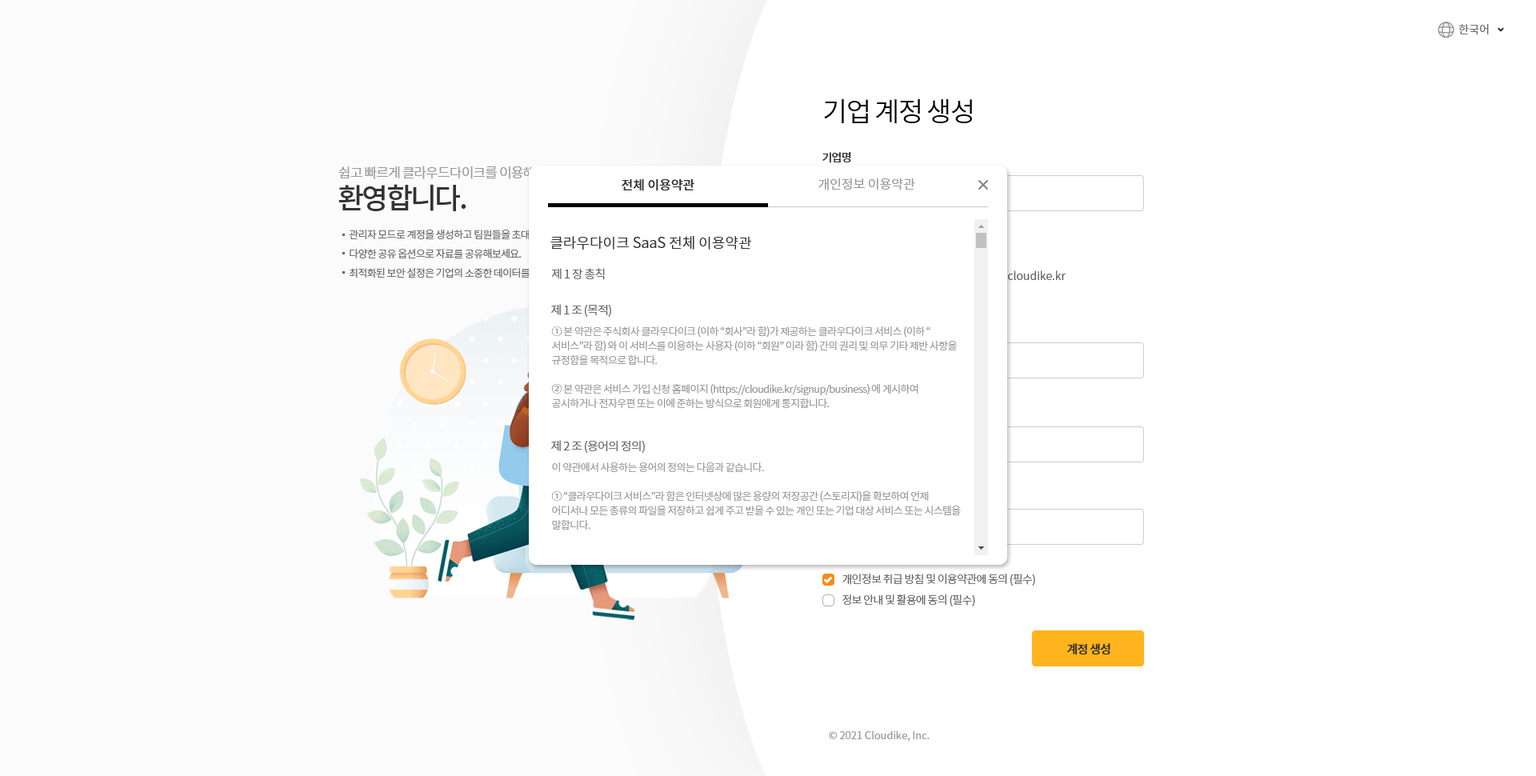
<style>
.page{position:relative;width:1536px;height:776px;background:#ffffff}
.page>*{position:absolute;margin:0}
.t1{font:11.2px "NotoSansCJKkr-DemiLight";color:#666666}
.t2{font:27.2px "NotoSansCJKkr-DemiLight";letter-spacing:-0.05em;color:#000000}
.t3{font:11.2px "NotoSansCJKkr-Medium";letter-spacing:-0.05em;color:#333333}
.t4{font:13.6px "NotoSansCJKkr-DemiLight";letter-spacing:-0.05em;color:#999999}
.t5{font:28.8px "NotoSansCJKkr-Medium";letter-spacing:-0.075em;color:#333333}
.t6{font:12.8px "NotoSansCJKkr-Medium";color:#333333}
.t7{font:12.8px "NotoSansCJKkr-DemiLight";color:#999999}
.t8{font:10.4px/19.2px "NotoSansCJKkr-DemiLight";letter-spacing:-0.05em;color:#666666}
.t9{font:14.4px "NotoSansCJKkr-DemiLight";color:#333333}
.t10{font:12px "NotoSansCJKkr-DemiLight";letter-spacing:-0.05em;color:#666666}
.t11{font:10.4px/14.4px "NotoSansCJKkr-DemiLight";letter-spacing:-0.05em;color:#999999}
.t12{font:11.2px "NotoSansCJKkr-DemiLight";letter-spacing:-0.05em;color:#666666}
.t13{font:12px "NotoSansCJKkr-Medium";letter-spacing:-0.05em;color:#2d2d2d}
.t14{font:10.4px "NotoSansCJKkr-DemiLight";color:#999999}
</style>
<div class="page">
<p class="t1" style="left:1459px;top:24px;width:30px;height:11px">한국어</p>
<p class="t2" style="left:824px;top:98px;width:148px;height:26px">기업 계정 생성</p>
<p class="t3" style="left:823px;top:152px;width:28px;height:11px">기업명</p>
<p class="t4" style="left:338px;top:166px;width:236px;height:13px">쉽고 빠르게 클라우드다이크를 이용해보세요.</p>
<p class="t5" style="left:338px;top:184px;width:128px;height:27px">환영합니다.</p>
<p class="t6" style="left:622px;top:179px;width:73px;height:12px">전체 이용약관</p>
<p class="t7" style="left:819px;top:178px;width:96px;height:12px">개인정보 이용약관</p>
<p class="t8" style="left:349px;top:230px;width:269px;height:48px">관리자 모드로 계정을 생성하고 팀원들을 초대해보세요.<br>다양한 공유 옵션으로 자료를 공유해보세요.<br>최적화된 보안 설정은 기업의 소중한 데이터를 안전하게 지켜줍니다.</p>
<p class="t9" style="left:551px;top:236px;width:200px;height:14px">클라우다이크 SaaS 전체 이용약관</p>
<p class="t10" style="left:551px;top:268px;width:54px;height:12px">제 1 장 총칙</p>
<p class="t1" style="left:1005px;top:270px;width:61px;height:10px">.cloudike.kr</p>
<p class="t10" style="left:551px;top:304px;width:60px;height:13px">제 1 조 (목적)</p>
<p class="t11" style="left:551px;top:326px;width:406px;height:82px">① 본 약관은 주식회사 클라우다이크 (이하 “회사”라 함)가 제공하는 클라우다이크 서비스 (이하 “서비스”라 함) 와 이 서비스를 이용하는 사용자 (이하 “회원” 이라 함) 간의 권리 및 의무 기타 제반 사항을 규정함을 목적으로 합니다.<br><br>② 본 약관은 서비스 가입 신청 홈페이지 (https://cloudike.kr/signup/business) 에 게시하여 공시하거나 전자우편 또는 이에 준하는 방식으로 회원에게 통지합니다.</p>
<p class="t10" style="left:551px;top:440px;width:94px;height:13px">제 2 조 (용어의 정의)</p>
<p class="t11" style="left:551px;top:462px;width:410px;height:68px">이 약관에서 사용하는 용어의 정의는 다음과 같습니다.<br><br>① “클라우다이크 서비스”라 함은 인터넷상에 많은 용량의 저장공간 (스토리지)을 확보하여 언제 어디서나 모든 종류의 파일을 저장하고 쉽게 주고 받을 수 있는 개인 또는 기업 대상 서비스 또는 시스템을 말합니다.</p>
<p class="t12" style="left:843px;top:574px;width:192px;height:12px">개인정보 취급 방침 및 이용약관에 동의 (필수)</p>
<p class="t12" style="left:843px;top:595px;width:132px;height:12px">정보 안내 및 활용에 동의 (필수)</p>
<p class="t13" style="left:1067px;top:643px;width:44px;height:12px">계정 생성</p>
<p class="t14" style="left:829px;top:731px;width:101px;height:11px">© 2021 Cloudike, Inc.</p>
</div>
